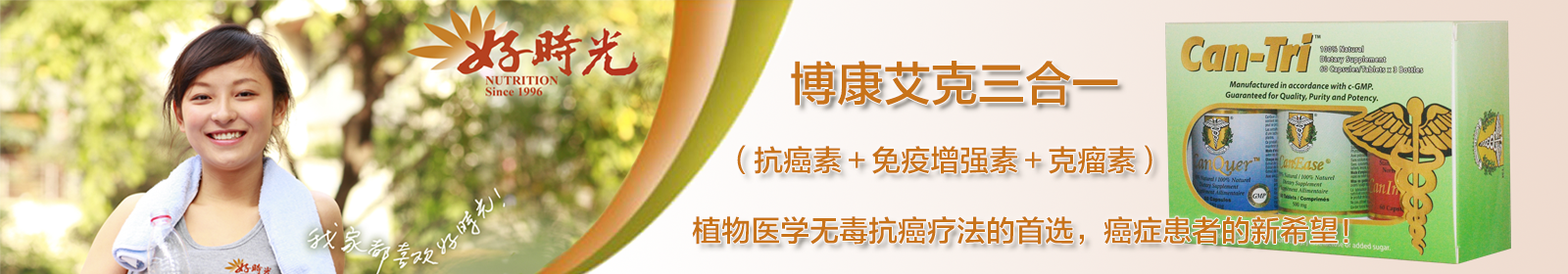
<style>
.page{position:relative;width:1568px;height:274px}
.page>*{position:absolute;margin:0}
.t1{font:29.4px "FZLTZHK--GBK1-0";color:#c87319}
.t2{font:47px "FZLTZHK--GBK1-0";color:#c87319}
</style>
<div class="page">
<p class="t1" style="left:692px;top:61px;width:656px;height:184px"><span class="t2">博康艾克三合一<br></span><br>    （抗癌素＋免疫增强素＋克瘤素）<br><br>植物医学无毒抗癌疗法的首选，癌症患者的新希望！</p>
</div>
